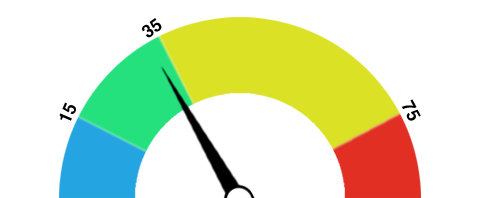
<style>
.page{position:relative;width:480px;height:198px;background:#ffffff}
.page>*{position:absolute;margin:0}
.t1{font:16.7px "H2gtrE";letter-spacing:-0.025em;color:#000000}
</style>
<div class="page">
<p class="t1" style="left:142px;top:18px;width:20px;height:20px;rotate:-36deg">35</p>
<p class="t1" style="left:59px;top:102px;width:17px;height:19px;rotate:-67deg">15</p>
<p class="t1" style="left:402px;top:99px;width:19px;height:22px;rotate:62deg">75</p>
</div>
